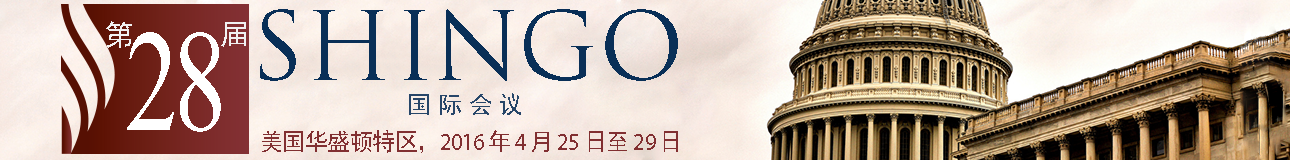
<style>
.page{position:relative;width:1290px;height:160px}
.page>*{position:absolute;margin:0}
.t1{font:92.8px "TrajanPro-Regular";color:#092f57}
.t2{font:29.2px "SimHei";color:#f1f2f2}
.t3{font:145.5px "MongolianBaiti";letter-spacing:-0.06em;color:#ffffff;scale:0.74 1}
.t4{font:23.7px "SimHei";letter-spacing:0.214em;color:#274669}
.t5{font:24.3px "SimHei";letter-spacing:-0.03em;color:#812f31;scale:0.94 1}
.t6{font:24.3px "MyriadPro-Regular";letter-spacing:-0.03em;color:#812f31;scale:0.94 1}
</style>
<div class="page">
<p class="t1" style="left:260px;top:9px;width:418px;height:72px">SHINGO</p>
<p class="t2" style="left:106px;top:21px;width:26px;height:27px">第</p>
<p class="t2" style="left:221px;top:22px;width:25px;height:25px">届</p>
<p class="t3" style="left:127px;top:32px;width:94px;height:100px">28</p>
<p class="t4" style="left:409px;top:93px;width:112px;height:22px">国际会议</p>
<p class="t5" style="left:262px;top:130px;width:416px;height:23px">美国华盛顿特区，<span class="t6">2016 </span>年<span class="t6"> 4 </span>月<span class="t6"> 25 </span>日至<span class="t6"> 29 </span>日</p>
</div>
